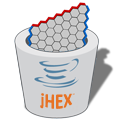
<style>
.page{position:relative;width:120px;height:120px;background:#ffffff}
.page>*{position:absolute;margin:0}
.t1{font:16.3px "Calibri-Bold";color:#e77224}
</style>
<div class="page">
<p class="t1" style="left:40px;top:93px;width:32px;height:16px">jHEX</p>
</div>
